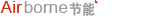
<style>
.page{position:relative;width:143px;height:17px;background:#ffffff}
.page>*{position:absolute;margin:0}
.t1{font:17.4px "ArialMT";color:#999999}
.t2{font:17.4px "ArialMT";color:#d12610}
.t3{font:14px "SimHei";letter-spacing:0.005em;color:#999999;font-weight:bold;scale:0.9 1}
</style>
<div class="page">
<p class="t1" style="left:0px;top:1px;width:68px;height:12px"><span class="t2">Air </span>borne</p>
<p class="t3" style="left:69px;top:2px;width:26px;height:14px">节能</p>
</div>
